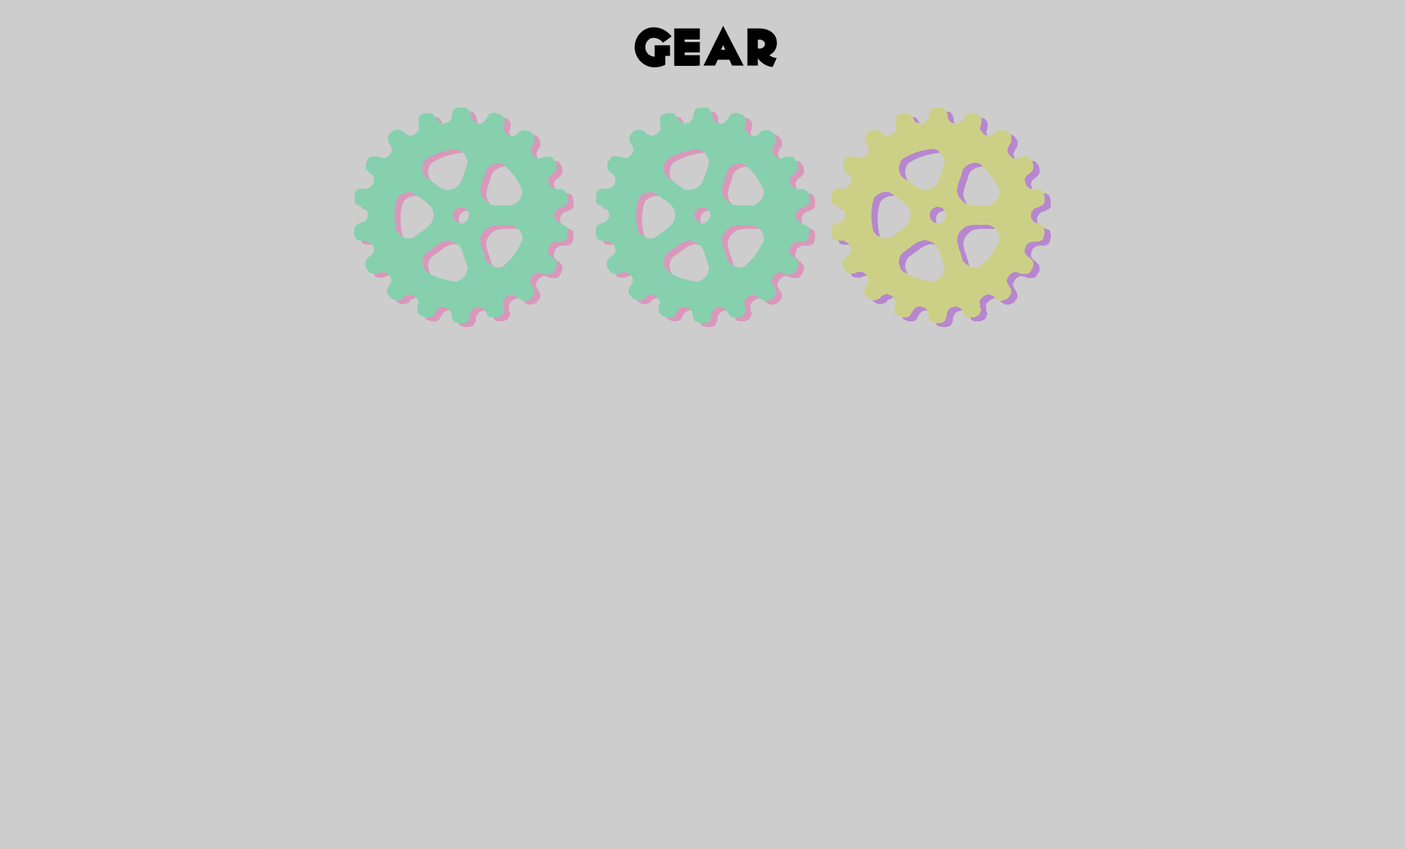
<style>
.page{position:relative;width:1405px;height:849px;background:#cdcdcd}
.page>*{position:absolute;margin:0}
.t1{font:52.7px "Geomancy-ExtraBold";color:#000000}
</style>
<div class="page">
<p class="t1" style="left:634px;top:26px;width:143px;height:41px">GEAR</p>
</div>
